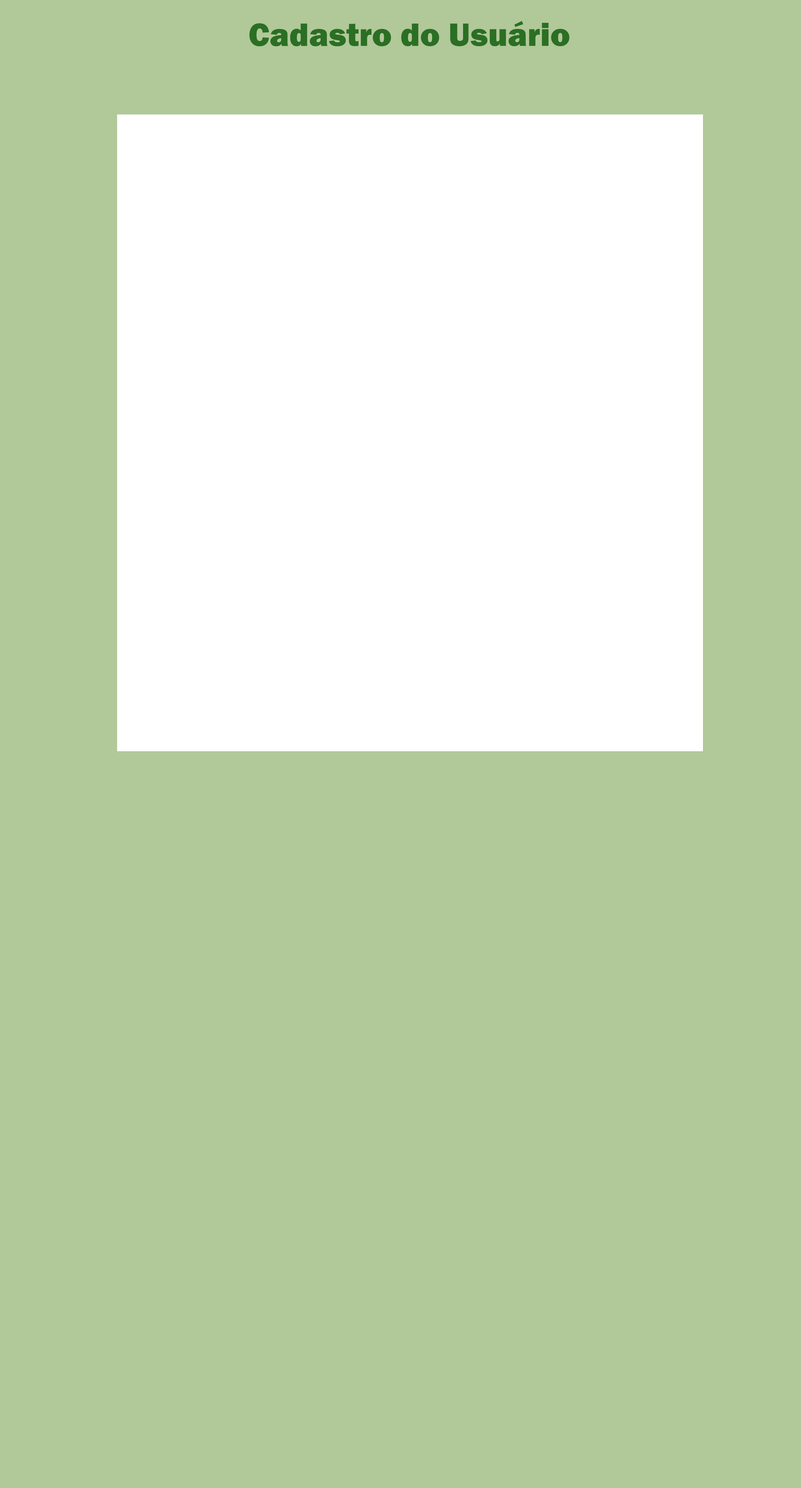
<style>
.page{position:relative;width:801px;height:1488px;background:#b1c899}
.page>*{position:absolute;margin:0}
.t1{font:57.2px "FranklinGothic-Heavy";letter-spacing:0.005em;color:#2a6f23}
</style>
<div class="page">
<p class="t1" style="left:250px;top:21px;width:320px;height:26px">Cadastro do Usuário</p>
</div>
